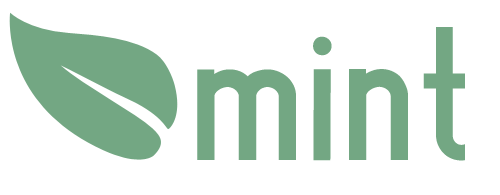
<style>
.page{position:relative;width:500px;height:195px;background:#ffffff}
.page>*{position:absolute;margin:0}
.t1{font:172px "Airplane";color:#73a783}
</style>
<div class="page">
<p class="t1" style="left:197px;top:27px;width:268px;height:134px">mint</p>
</div>
